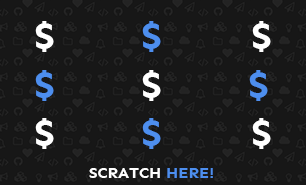
<style>
.page{position:relative;width:306px;height:185px;background:#171717}
.page>*{position:absolute;margin:0}
.t1{font:41.8px "Sen-Bold";color:#ffffff}
.t2{font:41.8px "Sen-Bold";color:#4d8eee}
.t3{font:16px "Sen-Bold";color:#ffffff}
.t4{font:16px "Sen-Bold";color:#4d8eee}
</style>
<div class="page">
<p class="t1" style="left:35px;top:21px;width:19px;height:31px">$</p>
<p class="t2" style="left:142px;top:21px;width:19px;height:31px">$</p>
<p class="t1" style="left:252px;top:21px;width:19px;height:31px">$</p>
<p class="t2" style="left:35px;top:70px;width:19px;height:31px">$</p>
<p class="t1" style="left:142px;top:70px;width:19px;height:31px">$</p>
<p class="t2" style="left:249px;top:70px;width:19px;height:31px">$</p>
<p class="t1" style="left:35px;top:118px;width:19px;height:31px">$</p>
<p class="t2" style="left:142px;top:118px;width:19px;height:31px">$</p>
<p class="t1" style="left:252px;top:118px;width:19px;height:31px">$</p>
<p class="t3" style="left:89px;top:168px;width:124px;height:10px">SCRATCH <span class="t4">HERE!</span></p>
</div>
